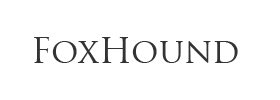
<style>
.page{position:relative;width:280px;height:100px;background:#ffffff}
.page>*{position:absolute;margin:0}
.t1{font:34px "TrajanPro-Regular";color:#333333}
</style>
<div class="page">
<p class="t1" style="left:34px;top:37px;width:204px;height:26px">FoxHound</p>
</div>
